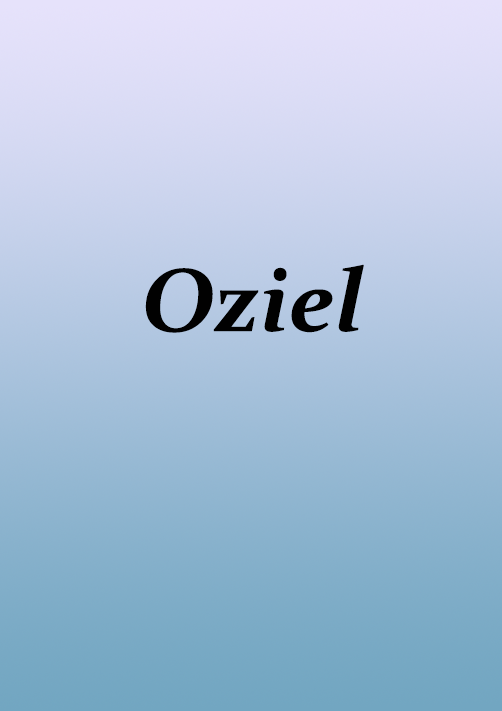
<style>
.page{position:relative;width:502px;height:711px}
.page>*{position:absolute;margin:0}
.t1{font:90px "Constantia-BoldItalic";color:#010101}
</style>
<div class="page">
<p class="t1" style="left:145px;top:264px;width:219px;height:69px">Oziel</p>
</div>
